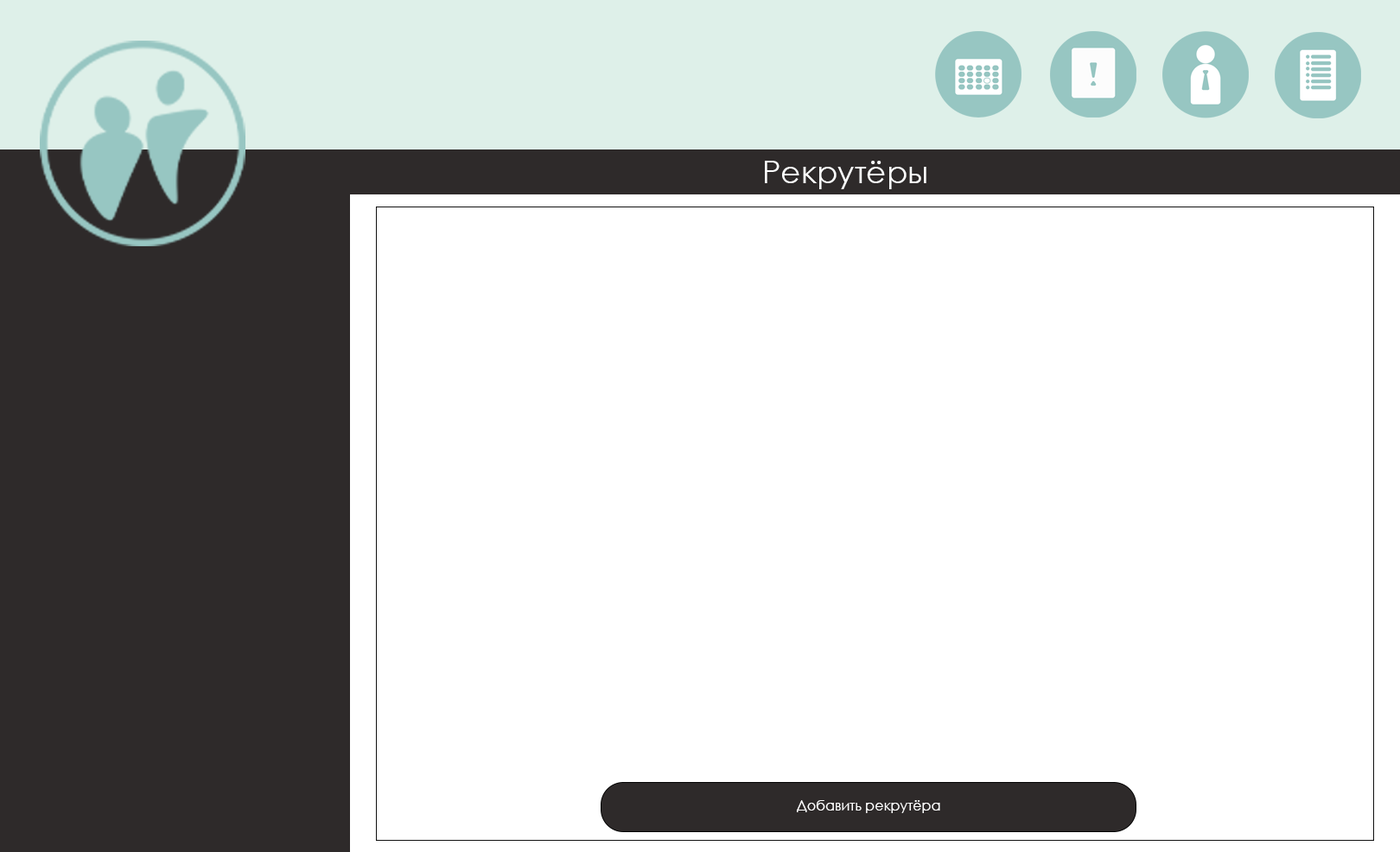
<style>
.page{position:relative;width:1400px;height:852px;background:#ffffff}
.page>*{position:absolute;margin:0}
.t1{font:31.1px "CenturyGothic";color:#ffffff}
.t2{font:13.8px "CenturyGothic";color:#ffffff}
</style>
<div class="page">
<p class="t1" style="left:765px;top:161px;width:161px;height:28px">Рекрутёры</p>
<p class="t2" style="left:797px;top:800px;width:143px;height:13px">Добавить рекрутёра</p>
</div>
